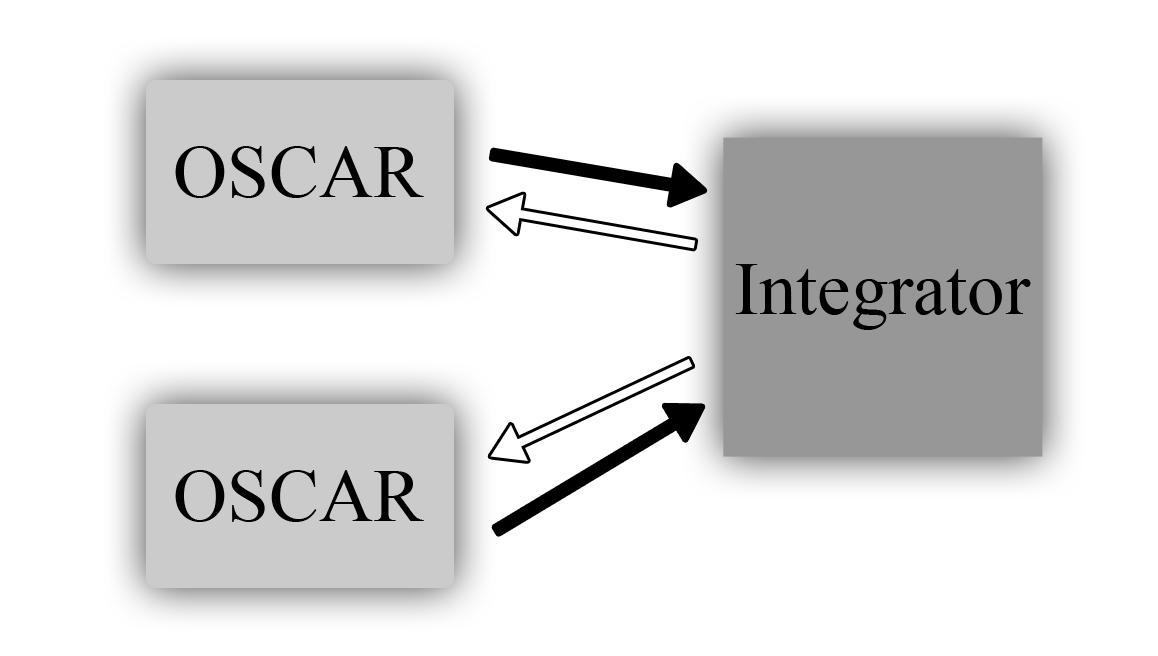
<style>
.page{position:relative;width:1158px;height:656px;background:#ffffff}
.page>*{position:absolute;margin:0}
.t1{font:75px "TimesNewRomanPSMT";color:#000000}
</style>
<div class="page">
<p class="t1" style="left:175px;top:146px;width:249px;height:52px">OSCAR</p>
<p class="t1" style="left:735px;top:264px;width:296px;height:66px">Integrator</p>
<p class="t1" style="left:175px;top:470px;width:249px;height:52px">OSCAR</p>
</div>
